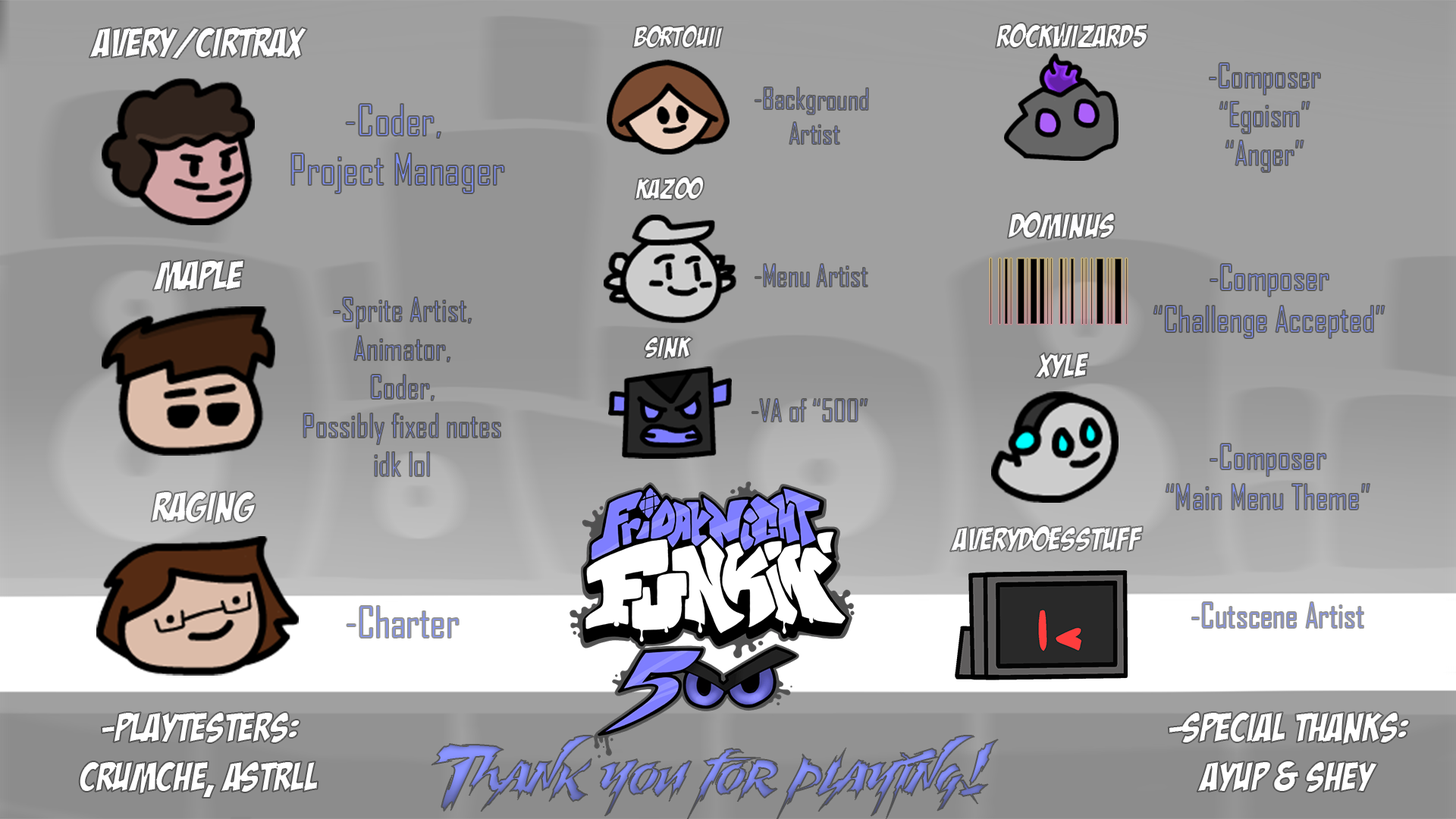
<style>
.page{position:relative;width:1456px;height:819px;background:#a0a0a0}
.page>*{position:absolute;margin:0}
.t1{font:41.6px "BadaBoomBB";color:#fefeff}
.t2{font:28.8px "BadaBoomBB";color:#fefeff}
.t3{font:32.3px "BadaBoomBB";color:#fefeff}
.t4{font:32.3px "AgencyFB-Reg"}
.t5{font:28.8px "AgencyFB-Reg"}
.t6{font:41.6px "AgencyFB-Reg"}
.t7{font:29.5px "BadaBoomBB";color:#fefeff}
.t8{font:34.5px "BadaBoomBB";color:#fefeff}
.t9{font:29.5px "AgencyFB-Reg"}
.t10{font:34.5px "AgencyFB-Reg"}
.t11{font:32.2px "AgencyFB-Reg"}
.t12{font:33.7px "BadaBoomBB";color:#fefeff}
.t13{font:33.7px "AgencyFB-Reg"}
.t14{font:41.6px "BadaBoomBB";color:#ffffff}
</style>
<div class="page">
<p class="t1" style="left:89px;top:27px;width:218px;height:32px">Avery/Cirtrax</p>
<p class="t2" style="left:632px;top:25px;width:91px;height:24px">Bortouii</p>
<p class="t3" style="left:996px;top:23px;width:152px;height:25px">Rockwizard5</p>
<p class="t4" style="left:1210px;top:63px;width:110px;height:109px;text-align:center">-Composer<br>“Egoism”<br>“Anger”</p>
<p class="t5" style="left:755px;top:87px;width:113px;height:57px;text-align:center">-Background <br>Artist</p>
<p class="t6" style="left:291px;top:104px;width:213px;height:89px;text-align:center">-Coder, <br>Project Manager</p>
<p class="t7" style="left:635px;top:177px;width:69px;height:22px">Kazoo</p>
<p class="t8" style="left:1007px;top:212px;width:108px;height:28px">Dominus</p>
<p class="t1" style="left:152px;top:260px;width:92px;height:33px">Maple</p>
<p class="t9" style="left:755px;top:264px;width:113px;height:23px">-Menu Artist</p>
<p class="t10" style="left:1153px;top:264px;width:232px;height:74px;text-align:center">-Composer<br>“Challenge Accepted”</p>
<p class="t11" style="left:303px;top:297px;width:197px;height:179px;text-align:center">-Sprite Artist,<br>Animator,<br>Coder,<br>Possibly fixed notes<br>idk lol</p>
<p class="t7" style="left:645px;top:337px;width:47px;height:22px">Sink</p>
<p class="t12" style="left:1034px;top:353px;width:55px;height:25px">Xyle</p>
<p class="t9" style="left:751px;top:399px;width:117px;height:23px">-VA of “500”</p>
<p class="t13" style="left:1166px;top:444px;width:204px;height:66px;text-align:center">-Composer<br>“Main Menu Theme”</p>
<p class="t1" style="left:151px;top:491px;width:105px;height:33px">Raging</p>
<p class="t12" style="left:950px;top:526px;width:193px;height:25px">Averydoesstuff</p>
<p class="t6" style="left:347px;top:606px;width:112px;height:32px">-Charter</p>
<p class="t13" style="left:1192px;top:602px;width:171px;height:26px">-Cutscene Artist</p>
<p class="t14" style="left:79px;top:712px;width:239px;height:86px;text-align:center">-Playtesters:<br>crumche, astrll</p>
<p class="t14" style="left:1168px;top:712px;width:242px;height:80px;text-align:center">-SPecial Thanks:<br>Ayup &amp; SHey</p>
</div>
